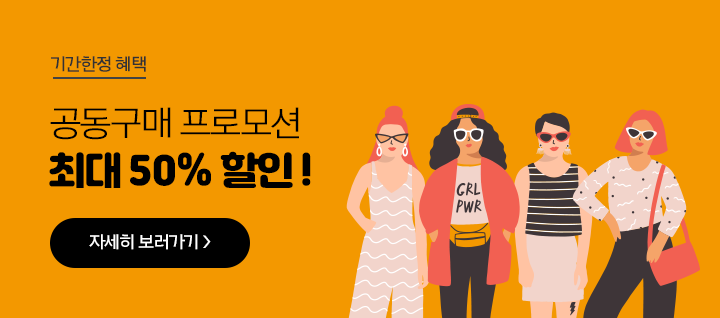
<style>
.page{position:relative;width:720px;height:318px;background:#f39800}
.page>*{position:absolute;margin:0}
.t1{font:18px "Arita-dotum-SemiBold_TTF";letter-spacing:-0.06em;color:#333333}
.t2{font:36px "Arita-dotum-Medium_TTF";letter-spacing:-0.06em;color:#000000}
.t3{font:38px "JalnanOTF";letter-spacing:-0.06em;color:#000000}
.t4{font:38px "JalnanOTF";color:#000000}
.t5{font:18px "Arita-dotum-SemiBold_TTF";letter-spacing:-0.06em;color:#ffffff}
</style>
<div class="page">
<p class="t1" style="left:51px;top:56px;width:95px;height:16px">기간한정 혜택</p>
<p class="t2" style="left:50px;top:107px;width:249px;height:33px">공동구매 프로모션</p>
<p class="t3" style="left:49px;top:151px;width:262px;height:37px">최대 <span class="t4">50%</span> 할인 !</p>
<p class="t5" style="left:89px;top:234px;width:122px;height:16px">자세히 보러가기 &gt;</p>
</div>
